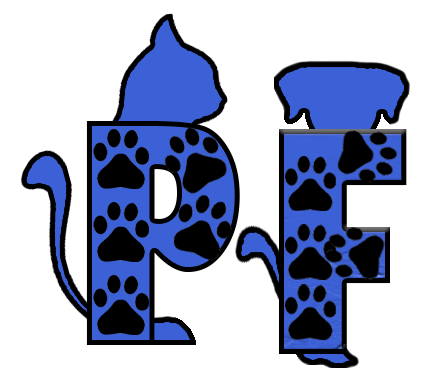
<style>
.page{position:relative;width:424px;height:382px;background:#ffffff}
.page>*{position:absolute;margin:0}
.t1{font:300.7px "GillSans-UltraBoldCondensed"}
.t2{font:301.8px "GillSans-UltraBoldCondensed"}
</style>
<div class="page">
<p class="t1" style="left:86px;top:121px;width:154px;height:224px">P</p>
<p class="t2" style="left:279px;top:129px;width:128px;height:225px">F</p>
</div>
